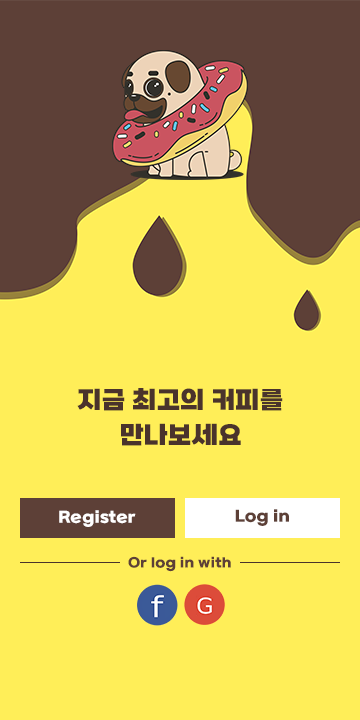
<style>
.page{position:relative;width:360px;height:720px;background:#ffee58}
.page>*{position:absolute;margin:0}
.t1{font:25px/35px "SBAggroB";color:#4a332c}
.t2{font:15px "SBAggroB";color:#ffffff}
.t3{font:15px "SBAggroB";color:#5d4037}
.t4{font:13px "SBAggroB";color:#5d4037}
</style>
<div class="page">
<p class="t1" style="left:77px;top:388px;width:206px;height:58px;text-align:center">지금 최고의 커피를<br>만나보세요</p>
<p class="t2" style="left:59px;top:510px;width:77px;height:17px">Register</p>
<p class="t3" style="left:235px;top:509px;width:54px;height:17px">Log in</p>
<p class="t4" style="left:128px;top:556px;width:103px;height:16px">Or log in with</p>
</div>
